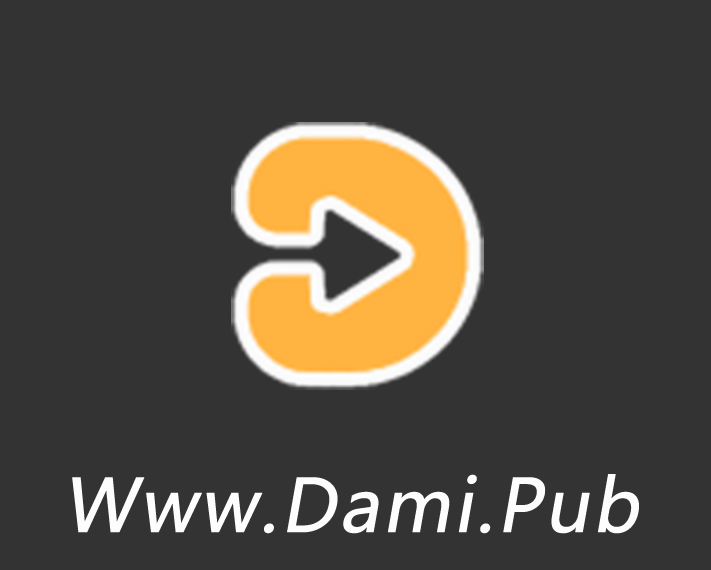
<style>
.page{position:relative;width:711px;height:570px;background:#333333}
.page>*{position:absolute;margin:0}
.t1{font:72px "MicrosoftYaHei";letter-spacing:0.02em;color:#fefdfd;font-weight:bold;font-style:italic}
</style>
<div class="page">
<p class="t1" style="left:72px;top:474px;width:567px;height:60px">Www.Dami.Pub</p>
</div>
